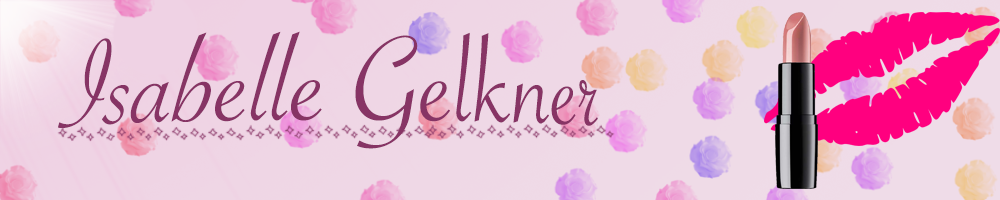
<style>
.page{position:relative;width:1000px;height:200px}
.page>*{position:absolute;margin:0}
.t1{font:130px "SavoyeLetPlain";color:#873465}
</style>
<div class="page">
<p class="t1" style="left:58px;top:31px;width:540px;height:118px">Isabelle Gelkner</p>
</div>
